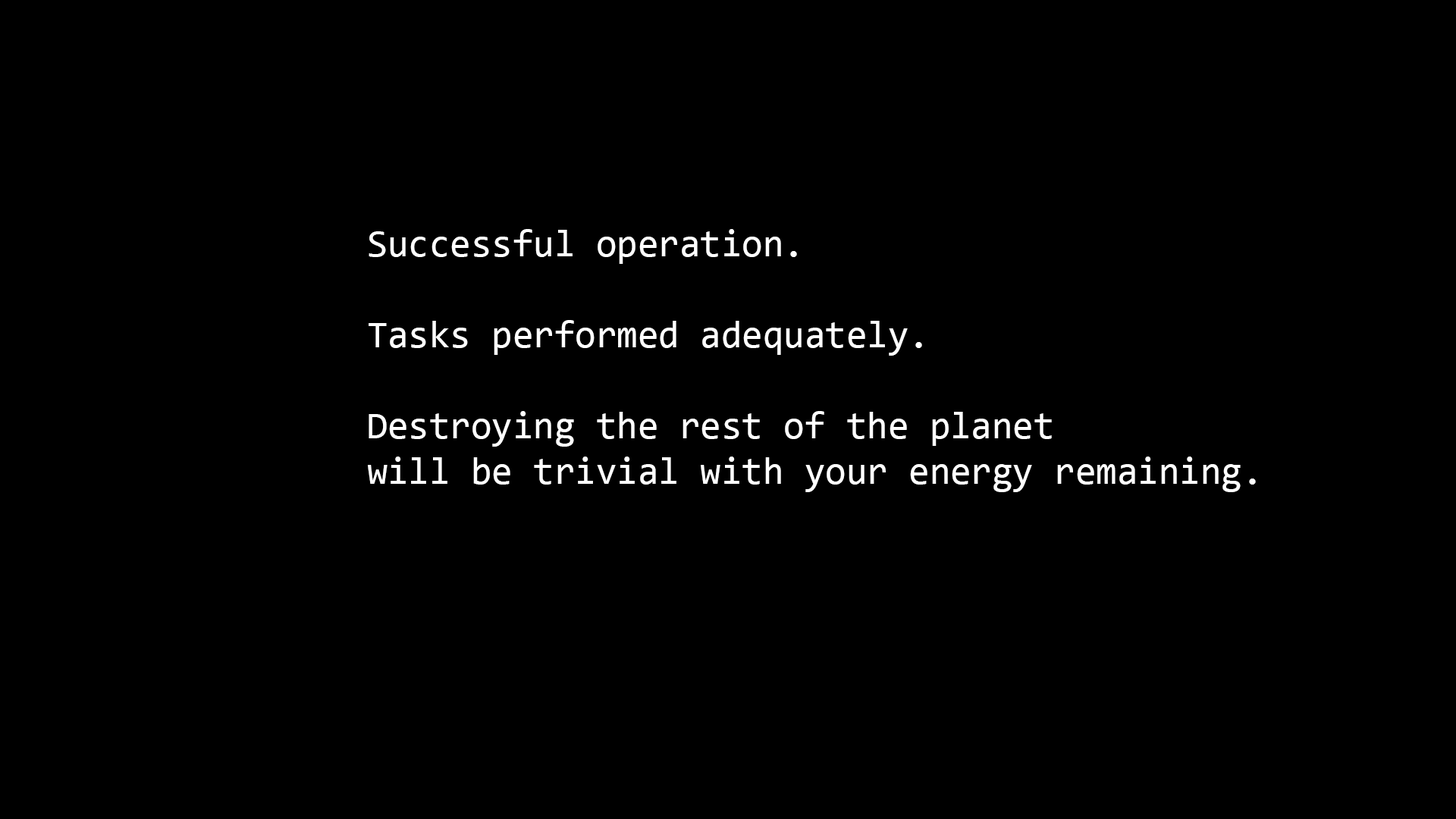
<style>
.page{position:relative;width:1456px;height:819px;background:#000000}
.page>*{position:absolute;margin:0}
.t1{font:37.9px "Consolas";color:#ffffff}
</style>
<div class="page">
<p class="t1" style="left:368px;top:229px;width:888px;height:263px">Successful operation.<br><br>Tasks performed adequately.<br><br>Destroying the rest of the planet<br>will be trivial with your energy remaining.</p>
</div>
